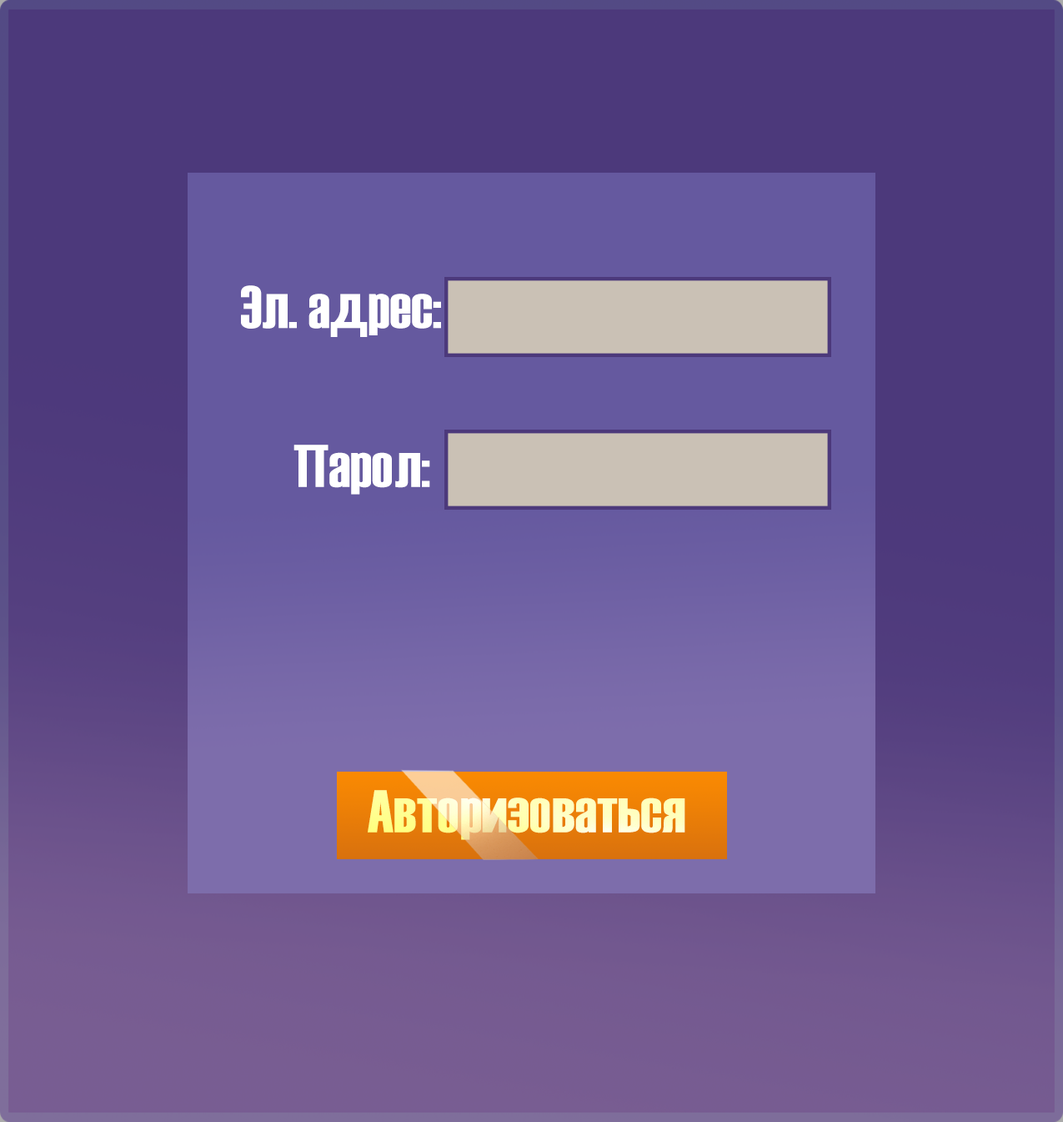
<style>
.page{position:relative;width:1063px;height:1122px;background:#4c397b}
.page>*{position:absolute;margin:0}
.t1{font:60px "Haettenschweiler";color:#ffffff}
.t2{font:60px "Haettenschweiler"}
</style>
<div class="page">
<p class="t1" style="left:241px;top:285px;width:200px;height:52px">Эл. адрес:</p>
<p class="t1" style="left:294px;top:444px;width:136px;height:50px">Парол:</p>
<p class="t2" style="left:368px;top:790px;width:317px;height:50px">Авторизоваться</p>
</div>
